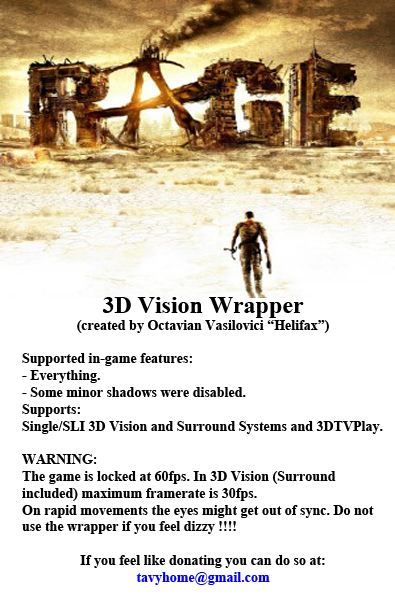
<style>
.page{position:relative;width:395px;height:600px;background:#ffffff}
.page>*{position:absolute;margin:0}
.t1{font:14px "TimesNewRomanPS-BoldMT";color:#000000}
.t2{font:24px "TimesNewRomanPS-BoldMT";color:#000000}
.t3{font:14px "TimesNewRomanPS-BoldMT";color:#0000ff}
</style>
<div class="page">
<p class="t1" style="left:22px;top:297px;width:361px;height:288px;text-align:center"><span class="t2">3D Vision Wrapper<br></span>(created by Octavian Vasilovici “Helifax”)<br><br>Supported in-game features:<br>- Everything.<br>- Some minor shadows were disabled.<br>Supports:<br>Single/SLI 3D Vision and Surround Systems and 3DTVPlay.<br><br>WARNING:<br>The game is locked at 60fps. In 3D Vision (Surround included) maximum framerate is 30fps.<br>On rapid movements the eyes might get out of sync. Do not use the wrapper if you feel dizzy !!!!<br><br>If you feel like donating you can do so at:<br><span class="t3">tavyhome@gmail.com</span></p>
</div>
